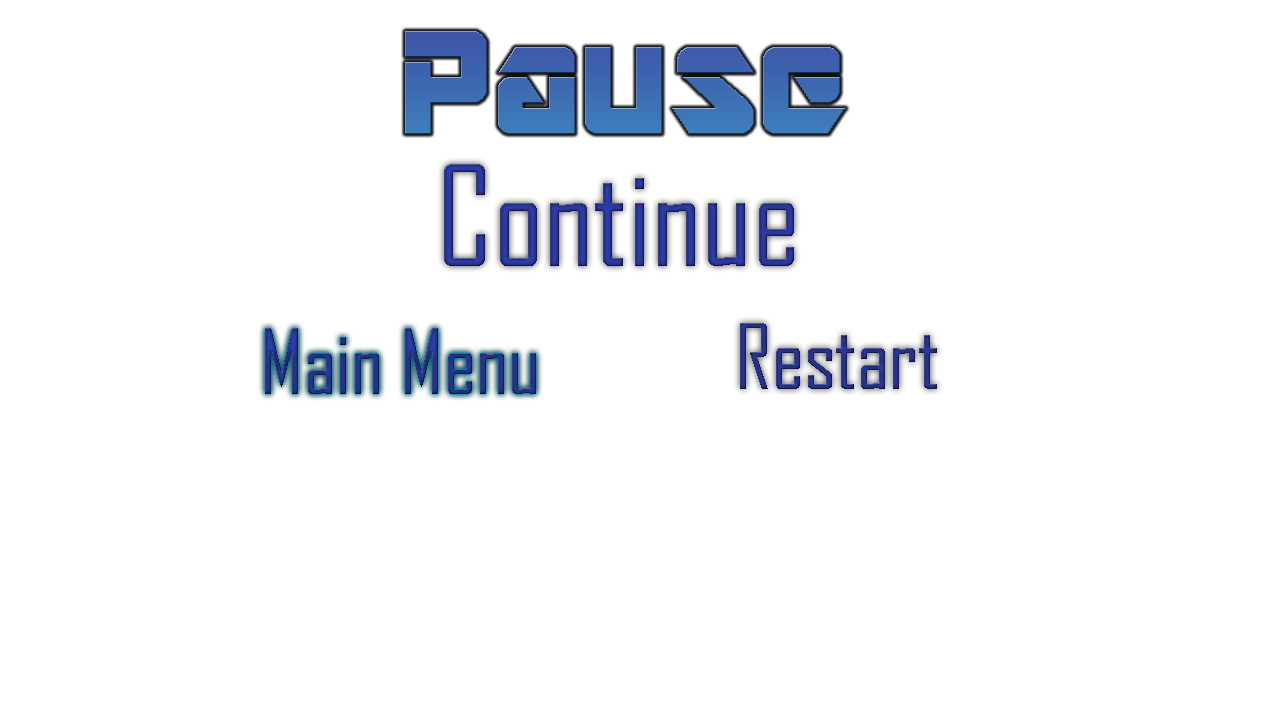
<style>
.page{position:relative;width:1280px;height:720px;background:#ffffff}
.page>*{position:absolute;margin:0}
.t1{font:162.9px "ARDESTINE";color:#3d6ab1}
.t2{font:133.1px "AgencyFB-Reg"}
.t3{font:86px "AgencyFB-Reg"}
</style>
<div class="page">
<p class="t1" style="left:405px;top:31px;width:441px;height:103px">Pause</p>
<p class="t1" style="left:405px;top:31px;width:441px;height:103px">Pause</p>
<p class="t1" style="left:405px;top:31px;width:441px;height:103px">Pause</p>
<p class="t2" style="left:444px;top:164px;width:350px;height:102px">Continue</p>
<p class="t3" style="left:265px;top:328px;width:271px;height:66px">Main Menu</p>
<p class="t3" style="left:265px;top:328px;width:271px;height:66px">Main Menu</p>
<p class="t3" style="left:740px;top:323px;width:197px;height:66px">Restart</p>
</div>
